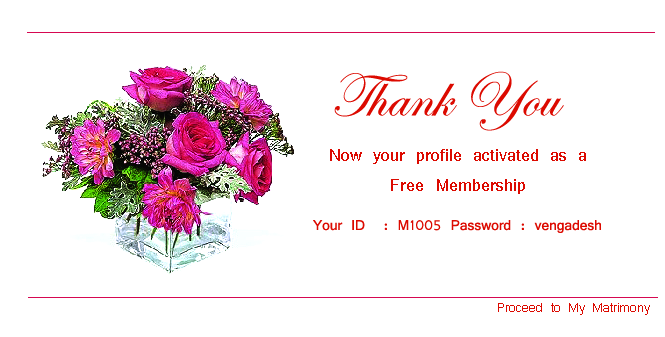
<style>
.page{position:relative;width:665px;height:337px;background:#ffffff}
.page>*{position:absolute;margin:0}
.t1{font:62.5px "EdwardianScriptITC";color:#dc0a00}
.t2{font:20.8px "Vrinda";color:#dc0a00}
.t3{font:18.8px "Vrinda";color:#dc0a00}
</style>
<div class="page">
<p class="t1" style="left:334px;top:71px;width:230px;height:60px">Thank You</p>
<p class="t2" style="left:313px;top:220px;width:288px;height:13px">Your ID  : M1005 Password : vengadesh</p>
<p class="t3" style="left:498px;top:303px;width:152px;height:12px">Proceed to My Matrimony</p>
</div>
